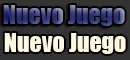
<style>
.page{position:relative;width:130px;height:60px;background:#333333}
.page>*{position:absolute;margin:0}
.t1{font:24px "Impact"}
.t2{font:24px "Impact";color:#fdf8e2}
</style>
<div class="page">
<p class="t1" style="left:3px;top:5px;width:122px;height:21px">Nuevo Juego</p>
<p class="t2" style="left:4px;top:33px;width:122px;height:21px">Nuevo Juego</p>
</div>
